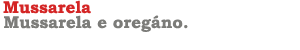
<style>
.page{position:relative;width:300px;height:50px;background:#ffffff}
.page>*{position:absolute;margin:0}
.t1{font:17px "BookmanOldStyle-Bold";color:#d42525}
.t2{font:17px "BookmanOldStyle-Bold";color:#7c7c79}
</style>
<div class="page">
<p class="t1" style="left:3px;top:0px;width:88px;height:14px">Mussarela</p>
<p class="t2" style="left:4px;top:15px;width:184px;height:17px">Mussarela e oregáno.</p>
</div>
